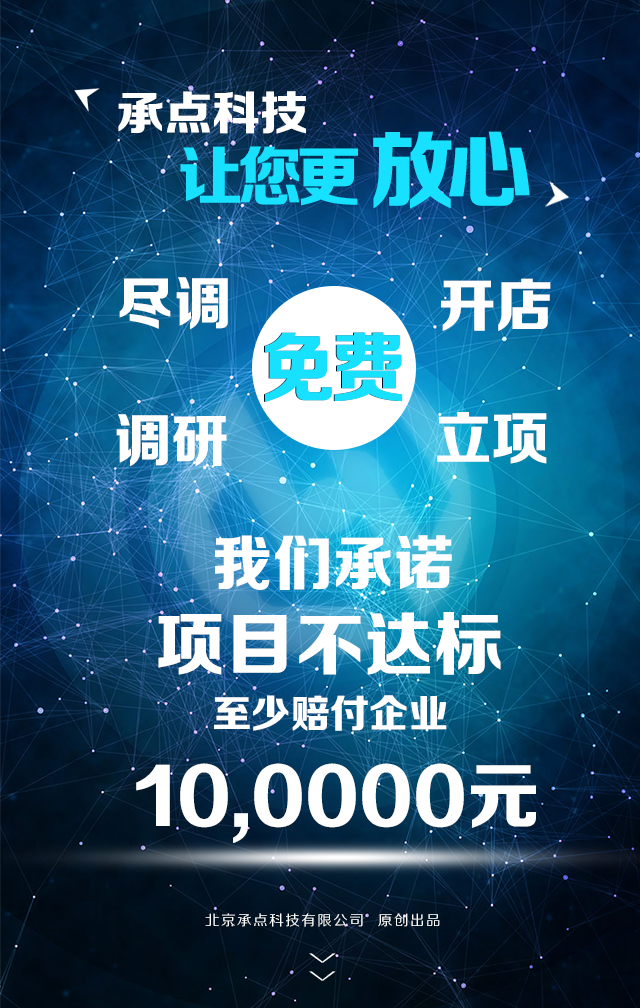
<style>
.page{position:relative;width:640px;height:1008px}
.page>*{position:absolute;margin:0}
.t1{font:46.8px "FZZDHJW--GB1-0";letter-spacing:-0.01em;color:#ffffff;text-transform:uppercase;scale:1.03 1}
.t2{font:85.3px "FZZDHJW--GB1-0";letter-spacing:-0.1em;color:#17e1ff;text-transform:uppercase}
.t3{font:65.3px "FZZDHJW--GB1-0";letter-spacing:-0.1em;color:#17e1ff;text-transform:uppercase}
.t4{font:57.8px "FZZDHJW--GB1-0";letter-spacing:-0.01em;color:#ffffff;text-transform:uppercase}
.t5{font:76.1px "FZZDHJW--GB1-0";letter-spacing:-0.1em;color:#17e1ff;text-transform:uppercase}
.t6{font:60.2px "FZZDHJW--GB1-0";letter-spacing:0.005em;color:#ffffff;text-transform:uppercase}
.t7{font:69.4px "FZZDHJW--GB1-0";letter-spacing:0.005em;color:#ffffff;text-transform:uppercase}
.t8{font:39px "FZZDHJW--GB1-0";letter-spacing:0.005em;color:#ffffff;text-transform:uppercase}
.t9{font:72.8px "FZZDHJW--GB1-0";letter-spacing:0.005em;color:#ffffff;text-transform:uppercase}
.t10{font:14.2px "FZZHJW--GB1-0";letter-spacing:0.1em;color:#ffffff;text-transform:uppercase}
.t11{font:36.8px "FZZXHJW--GB1-0";letter-spacing:0.5em;color:#ffffff;text-transform:uppercase;scale:0.44 1}
</style>
<div class="page">
<p class="t1" style="left:118px;top:91px;width:188px;height:43px">承点科技</p>
<p class="t2" style="left:373px;top:131px;width:157px;height:78px">放心</p>
<p class="t3" style="left:180px;top:146px;width:178px;height:60px">让您更</p>
<p class="t4" style="left:119px;top:277px;width:109px;height:53px">尽调</p>
<p class="t4" style="left:441px;top:278px;width:110px;height:53px">开店</p>
<p class="t5" style="left:264px;top:332px;width:138px;height:70px">免费</p>
<p class="t5" style="left:265px;top:332px;width:138px;height:70px">免费</p>
<p class="t4" style="left:116px;top:414px;width:111px;height:53px">调研</p>
<p class="t4" style="left:437px;top:412px;width:110px;height:52px">立项</p>
<p class="t6" style="left:215px;top:535px;width:237px;height:55px">我们承诺</p>
<p class="t7" style="left:158px;top:612px;width:343px;height:63px">项目不达标</p>
<p class="t8" style="left:214px;top:695px;width:233px;height:36px">至少赔付企业</p>
<p class="t9" style="left:136px;top:763px;width:400px;height:80px">10,0000元</p>
<p class="t10" style="left:205px;top:913px;width:235px;height:14px">北京承点科技有限公司  原创出品</p>
<p class="t11" style="left:309px;top:953px;width:27px;height:28px;rotate:90deg">&gt;&gt;</p>
</div>
